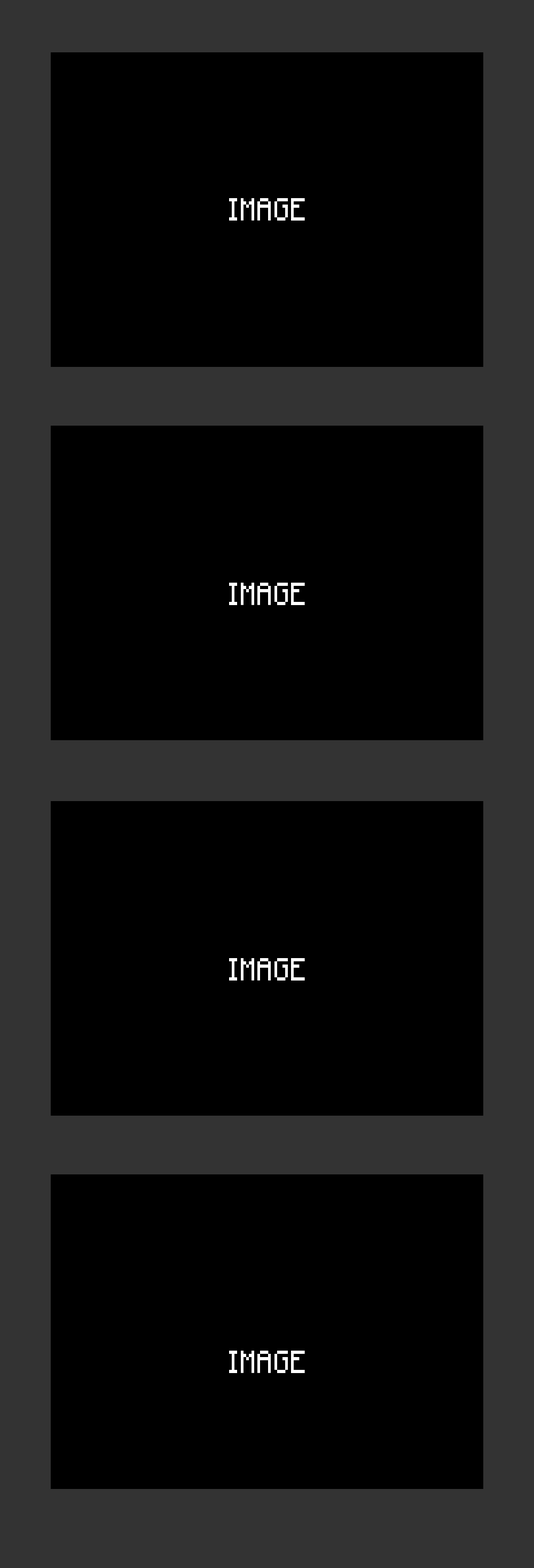
<style>
.page{position:relative;width:534px;height:1568px;background:#000000}
.page>*{position:absolute;margin:0}
.t1{font:31.9px "Minecraft-Regular";letter-spacing:0.02em;color:#ffffff;text-transform:uppercase;scale:0.85 1}
</style>
<div class="page">
<p class="t1" style="left:229px;top:198px;width:76px;height:23px">IMAGE</p>
<p class="t1" style="left:229px;top:583px;width:76px;height:22px">IMAGE</p>
<p class="t1" style="left:229px;top:958px;width:76px;height:23px">IMAGE</p>
<p class="t1" style="left:229px;top:1351px;width:76px;height:22px">IMAGE</p>
</div>
